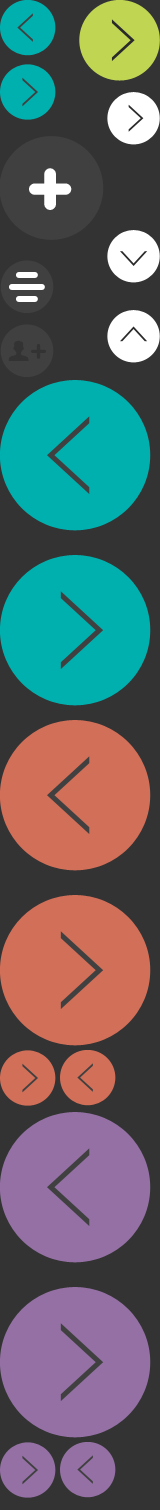
<style>
.page{position:relative;width:160px;height:1510px;background:#333333}
.page>*{position:absolute;margin:0}
.t1{font:81.9px "GothamRounded-Bold";letter-spacing:-0.03em;color:#ffffff}
</style>
<div class="page">
<p class="t1" style="left:29px;top:168px;width:43px;height:42px">+</p>
</div>
